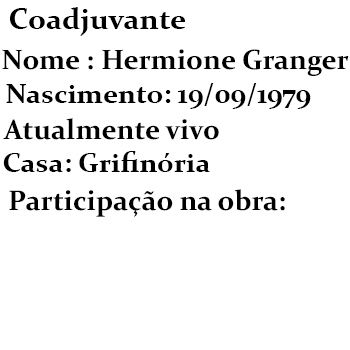
<style>
.page{position:relative;width:350px;height:350px;background:#ffffff}
.page>*{position:absolute;margin:0}
.t1{font:30px "Constantia-Bold";color:#000000}
.t2{font:28px "Constantia-Bold";color:#000000}
.t3{font:28.3px "Constantia-Bold";color:#000000}
</style>
<div class="page">
<p class="t1" style="left:10px;top:7px;width:175px;height:29px">Coadjuvante</p>
<p class="t2" style="left:2px;top:49px;width:347px;height:27px">Nome : Hermione Granger</p>
<p class="t2" style="left:6px;top:83px;width:305px;height:26px">Nascimento: 19/09/1979</p>
<p class="t3" style="left:3px;top:118px;width:216px;height:22px">Atualmente vivo</p>
<p class="t2" style="left:3px;top:151px;width:207px;height:21px">Casa: Grifinória</p>
<p class="t3" style="left:9px;top:189px;width:276px;height:28px">Participação na obra:</p>
</div>
